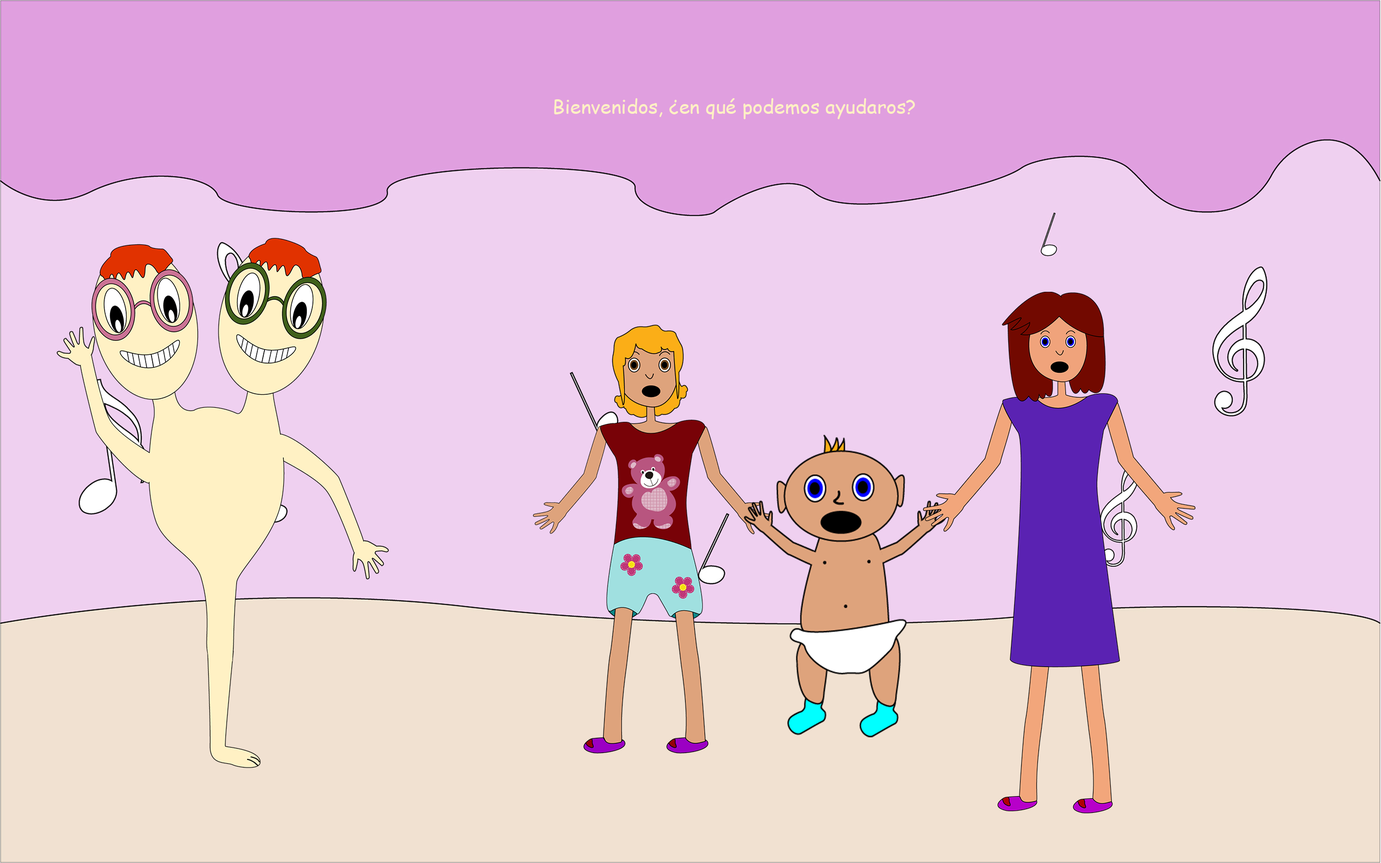
<style>
.page{position:relative;width:1381px;height:863px;background:#efd0f0}
.page>*{position:absolute;margin:0}
.t1{font:19.4px "ComicSansMS";color:#fff1c4}
</style>
<div class="page">
<p class="t1" style="left:554px;top:98px;width:361px;height:21px">Bienvenidos, ¿en qué podemos ayudaros?</p>
</div>
